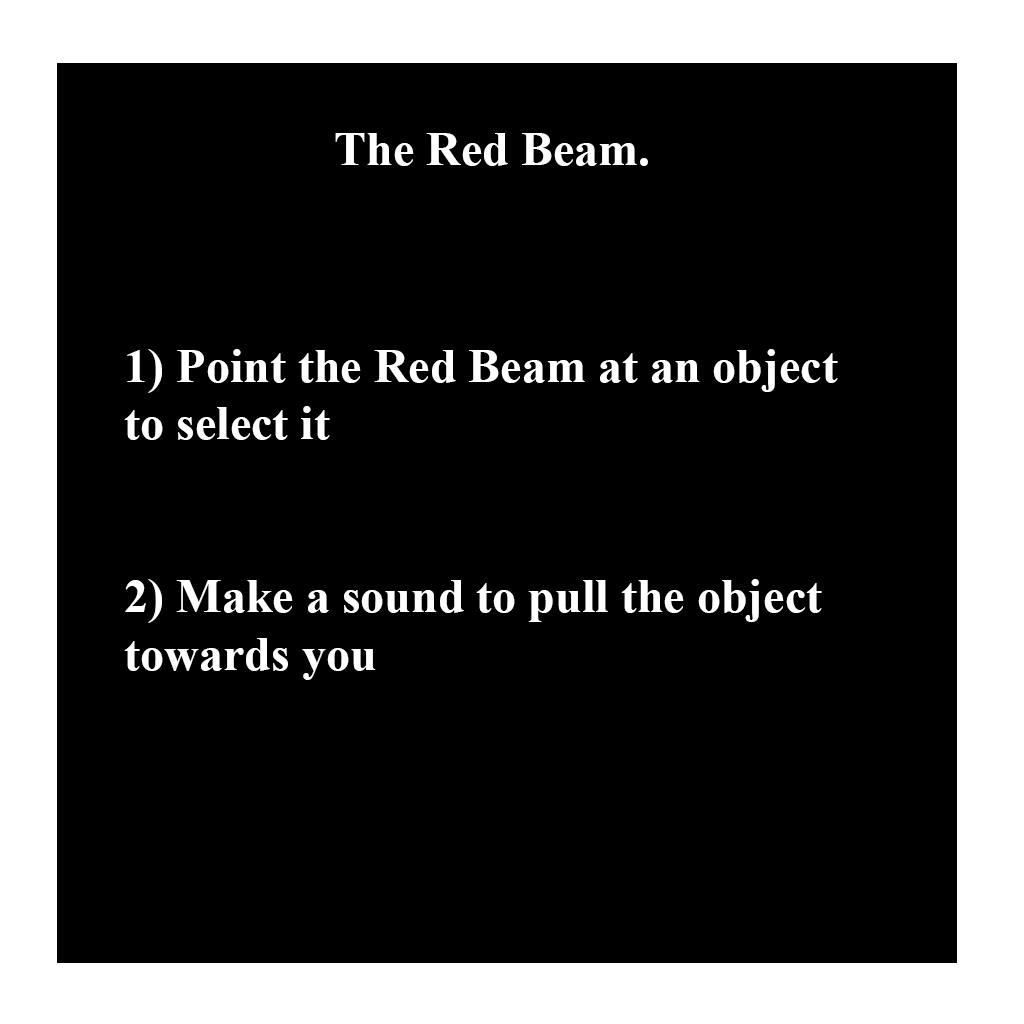
<style>
.page{position:relative;width:1024px;height:1024px;background:#000000}
.page>*{position:absolute;margin:0}
.t1{font:48px "TimesNewRomanPS-BoldMT";color:#ffffff}
</style>
<div class="page">
<p class="t1" style="left:335px;top:133px;width:313px;height:33px">The Red Beam.</p>
<p class="t1" style="left:124px;top:349px;width:714px;height:331px">1) Point the Red Beam at an object <br>to select it<br><br><br>2) Make a sound to pull the object <br>towards you</p>
</div>
